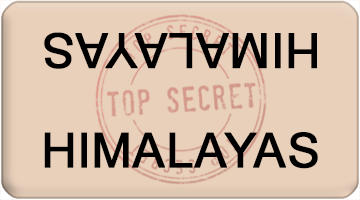
<style>
.page{position:relative;width:360px;height:200px;background:#e8d0bb}
.page>*{position:absolute;margin:0}
.t1{font:48px "ArialMT";color:#000000;font-weight:bold}
</style>
<div class="page">
<p class="t1" style="left:44px;top:32px;width:273px;height:37px;rotate:180deg">HIMALAYAS</p>
<p class="t1" style="left:44px;top:132px;width:274px;height:37px">HIMALAYAS</p>
</div>
